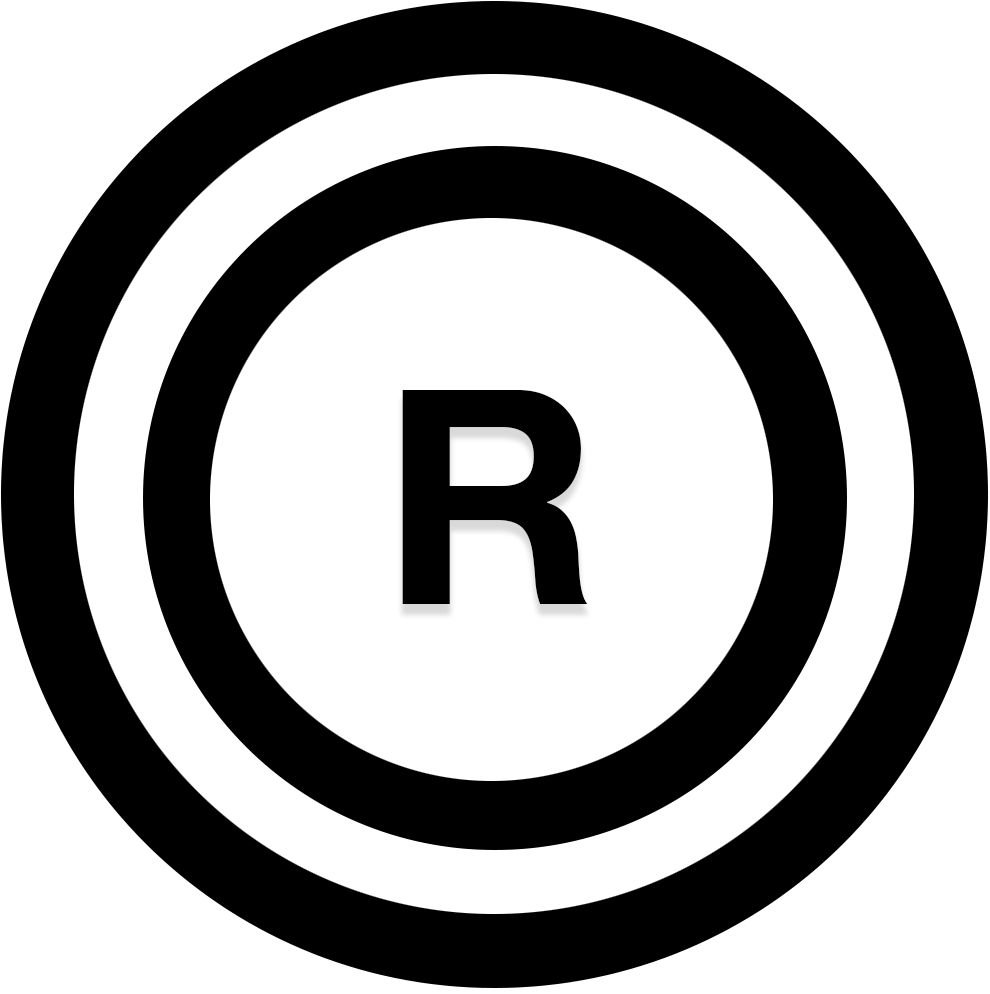
<style>
.page{position:relative;width:990px;height:994px;background:#ffffff}
.page>*{position:absolute;margin:0}
.t1{font:300px "HelveticaNeue-Bold";letter-spacing:-0.075em;color:#000000}
</style>
<div class="page">
<p class="t1" style="left:402px;top:390px;width:186px;height:214px">R</p>
</div>
